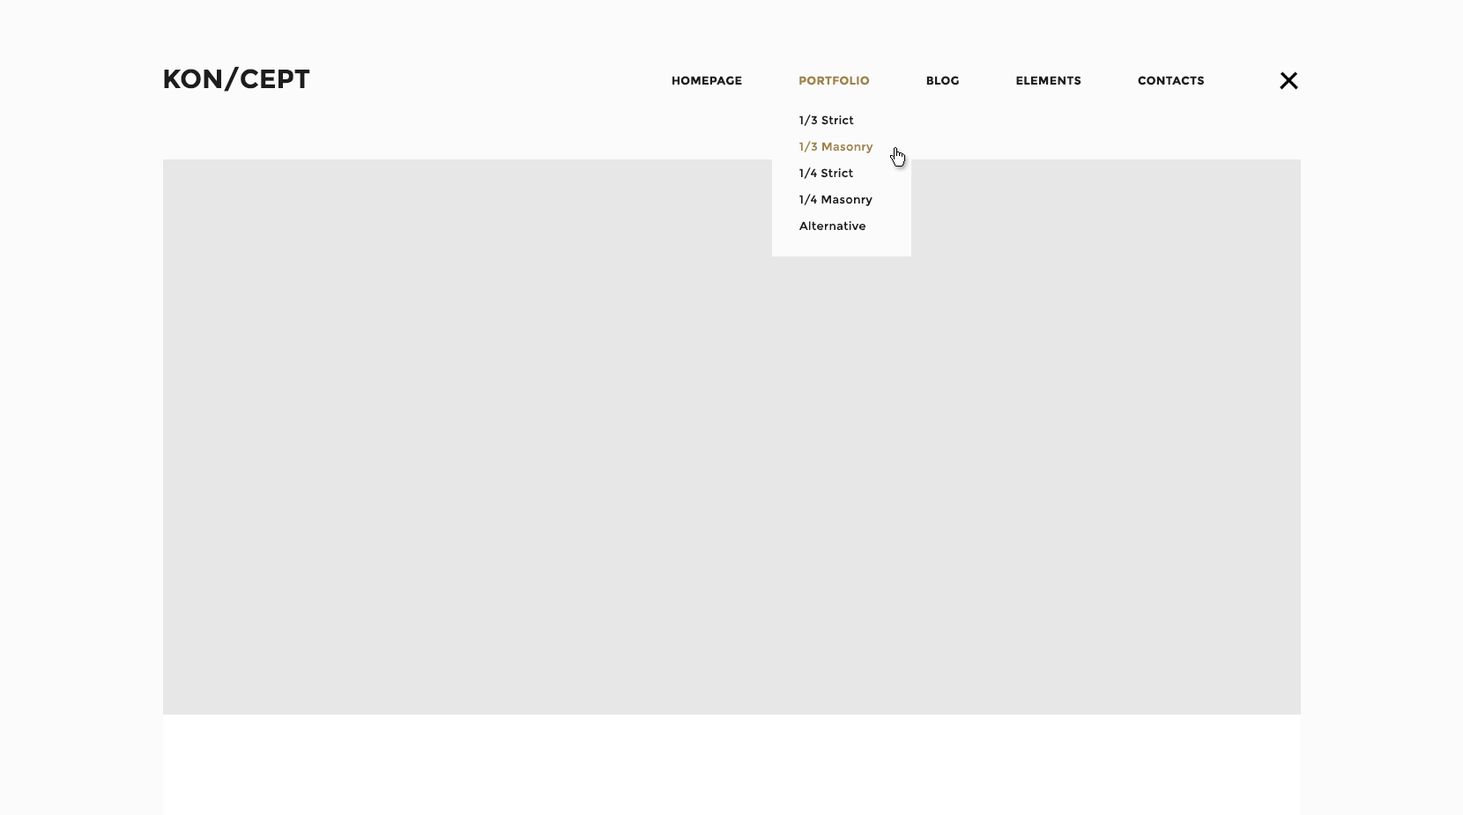
<style>
.page{position:relative;width:1463px;height:815px;background:#e7e7e7}
.page>*{position:absolute;margin:0}
.t1{font:11.5px "Montserrat-Bold";letter-spacing:0.025em;color:#1d1d1d;text-transform:uppercase}
.t2{font:11.5px "Montserrat-Bold";letter-spacing:0.025em;color:#9e8348;text-transform:uppercase}
.t3{font:11.5px/26.4px "Montserrat-Regular";letter-spacing:0.025em;color:#1d1d1d}
.t4{font:11.5px/26.4px "Montserrat-Regular";letter-spacing:0.025em;color:#9e8348}
</style>
<div class="page">
<p class="t1" style="left:672px;top:76px;width:532px;height:9px">Homepage                 <span class="t2">Portfolio</span>                 Blog                 ELEMENTS                 Contacts</p>
<p class="t3" style="left:799px;top:115px;width:74px;height:116px">1/3 Strict<br><span class="t4">1/3 Masonry<br></span>1/4 Strict<br>1/4 Masonry<br>Alternative</p>
</div>
